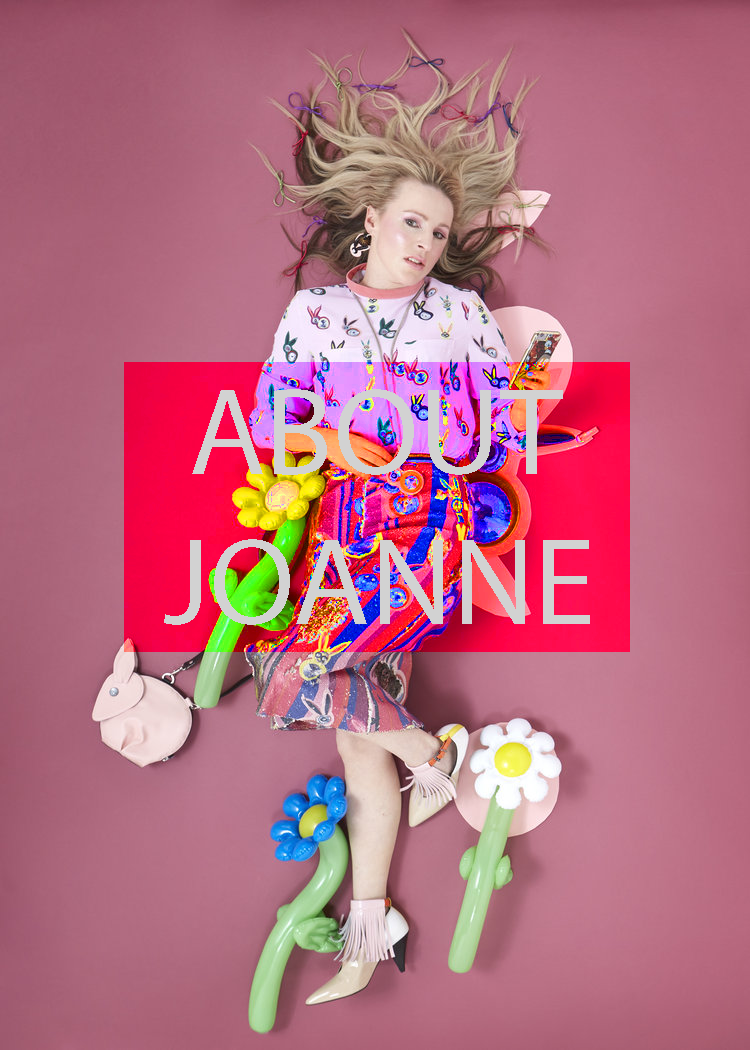
<style>
.page{position:relative;width:750px;height:1050px}
.page>*{position:absolute;margin:0}
.t1{font:125px "MyriadPro-Regular";color:#d2d2d2}
</style>
<div class="page">
<p class="t1" style="left:164px;top:389px;width:426px;height:236px">ABOUT <br>JOANNE</p>
</div>
